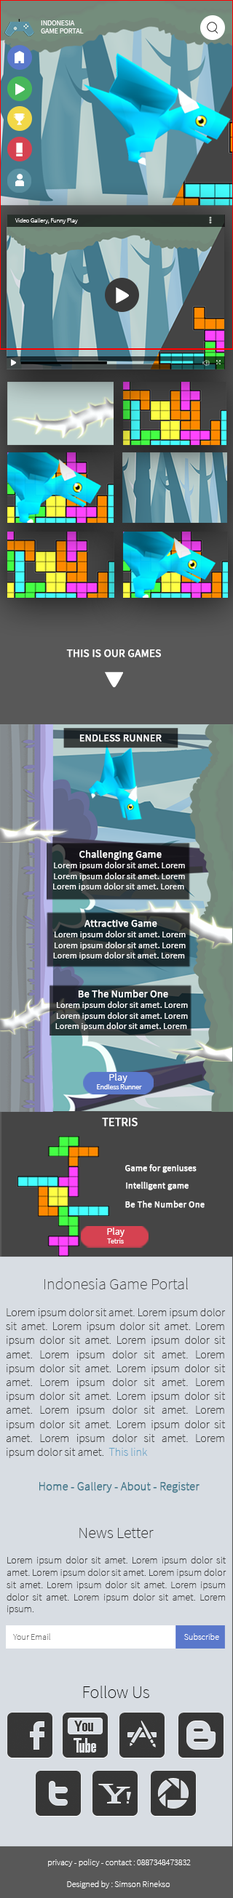
<style>
.page{position:relative;width:233px;height:1898px}
.page>*{position:absolute;margin:0}
.t1{font:7.1px "SourceSansPro-Regular";color:#fefefe}
.t2{font:6.2px "SourceSansPro-ExtraLight";color:#ffffff}
.t3{font:10.9px "SourceSansPro-Regular";color:#ffffff;font-weight:bold}
.t4{font:10.2px "SourceSansPro-Regular";color:#ffffff;font-weight:bold}
.t5{font:9px "SourceSansPro-Regular";color:#ffffff}
.t6{font:10.2px/10.8px "SourceSansPro-Regular";color:#ffffff;font-weight:bold}
.t7{font:7.1px "SourceSansPro-Regular";color:#ffffff}
.t8{font:10.4px "SourceSansPro-Regular";color:#ffffff}
.t9{font:11.4px "SourceSansPro-Regular";color:#ffffff;font-weight:bold}
.t10{font:8.8px "SourceSansPro-Regular";color:#ffffff;font-weight:bold}
.t11{font:9px "SourceSansPro-Regular";color:#ffffff;font-weight:bold}
.t12{font:7.2px "SourceSansPro-Regular";color:#ffffff}
.t13{font:9.9px "SourceSansPro-Regular";color:#ffffff}
.t14{font:16px "SourceSansPro-ExtraLight";color:#3f3f3f}
.t15{font:11.6px "SourceSansPro-ExtraLight";color:#3f3f3f}
.t16{font:11.6px "SourceSansPro-ExtraLight";color:#65a2c6}
.t17{font:11.6px "SourceSansPro-ExtraLight";color:#42788b;font-weight:bold}
.t18{font:16px "SourceSansPro-ExtraLight";color:#282828}
.t19{font:10.2px "SourceSansPro-ExtraLight";color:#3f3f3f}
.t20{font:8.8px "SourceSansPro-ExtraLight";color:#6f6f6f}
.t21{font:8.8px "SourceSansPro-ExtraLight";color:#ffffff}
.t22{font:17.4px "SourceSansPro-ExtraLight";color:#000000}
.t23{font:8.7px "SourceSansPro-ExtraLight";color:#ffffff}
</style>
<div class="page">
<p class="t1" style="left:41px;top:20px;width:43px;height:13px">INDONESIA<br>GAME PORTAL</p>
<p class="t2" style="left:15px;top:218px;width:63px;height:6px">Video Gallery, Funny Play</p>
<p class="t3" style="left:66px;top:649px;width:95px;height:8px">THIS IS OUR GAMES</p>
<p class="t4" style="left:79px;top:734px;width:82px;height:8px">ENDLESS RUNNER</p>
<p class="t5" style="left:53px;top:850px;width:132px;height:41px;text-align:center"><span class="t6">Challenging Game<br></span>Lorem ipsum dolor sit amet. Lorem <br>Lorem ipsum dolor sit amet. Lorem <br>Lorem ipsum dolor sit amet. Lorem</p>
<p class="t5" style="left:53px;top:920px;width:132px;height:40px;text-align:center"><span class="t6">Attractive Game<br></span>Lorem ipsum dolor sit amet. Lorem <br>Lorem ipsum dolor sit amet. Lorem <br>Lorem ipsum dolor sit amet. Lorem</p>
<p class="t5" style="left:55px;top:990px;width:133px;height:40px;text-align:center"><span class="t6">Be The Number One<br></span>Lorem ipsum dolor sit amet. Lorem <br>Lorem ipsum dolor sit amet. Lorem <br>Lorem ipsum dolor sit amet. Lorem</p>
<p class="t7" style="left:97px;top:1073px;width:45px;height:16px;text-align:center"><span class="t8">Play <br></span>Endless Runner</p>
<p class="t9" style="left:102px;top:1117px;width:35px;height:9px">TETRIS</p>
<p class="t10" style="left:125px;top:1164px;width:71px;height:9px">Game for geniuses</p>
<p class="t10" style="left:126px;top:1181px;width:62px;height:9px">Intelligent game</p>
<p class="t11" style="left:125px;top:1200px;width:79px;height:8px">Be The Number One</p>
<p class="t12" style="left:107px;top:1227px;width:17px;height:16px;text-align:center"><span class="t13">Play<br></span>Tetris</p>
<p class="t14" style="left:44px;top:1277px;width:144px;height:12px">Indonesia Game Portal</p>
<p class="t15" style="left:6px;top:1308px;width:219px;height:150px;text-align:justify">Lorem ipsum dolor sit amet. Lorem ipsum dolor sit amet. Lorem ipsum dolor sit amet. Lorem ipsum dolor sit amet. Lorem ipsum dolor sit amet. Lorem ipsum dolor sit amet. Lorem ipsum dolor sit amet. Lorem ipsum dolor sit amet. Lorem ipsum dolor sit amet. Lorem ipsum dolor sit amet. Lorem ipsum dolor sit amet. Lorem ipsum dolor sit amet. Lorem ipsum dolor sit amet. Lorem ipsum dolor sit amet. Lorem ipsum dolor sit amet. Lorem ipsum dolor sit amet.  <span class="t16">This link</span></p>
<p class="t17" style="left:39px;top:1482px;width:160px;height:11px">Home - Gallery - About - Register</p>
<p class="t18" style="left:79px;top:1528px;width:74px;height:10px">News Letter</p>
<p class="t19" style="left:7px;top:1556px;width:219px;height:58px;text-align:justify">Lorem ipsum dolor sit amet. Lorem ipsum dolor sit amet. Lorem ipsum dolor sit amet. Lorem ipsum dolor sit amet. Lorem ipsum dolor sit amet. Lorem ipsum dolor sit amet. Lorem ipsum dolor sit amet. Lorem ipsum.</p>
<p class="t20" style="left:13px;top:1633px;width:37px;height:6px">Your Email</p>
<p class="t21" style="left:184px;top:1633px;width:35px;height:6px">Subscribe</p>
<p class="t22" style="left:83px;top:1685px;width:66px;height:13px">Follow Us</p>
<p class="t23" style="left:48px;top:1858px;width:142px;height:8px">privacy - policy - contact : 0887348473832</p>
<p class="t21" style="left:67px;top:1880px;width:103px;height:8px">Designed by : Simson Rinekso</p>
</div>
